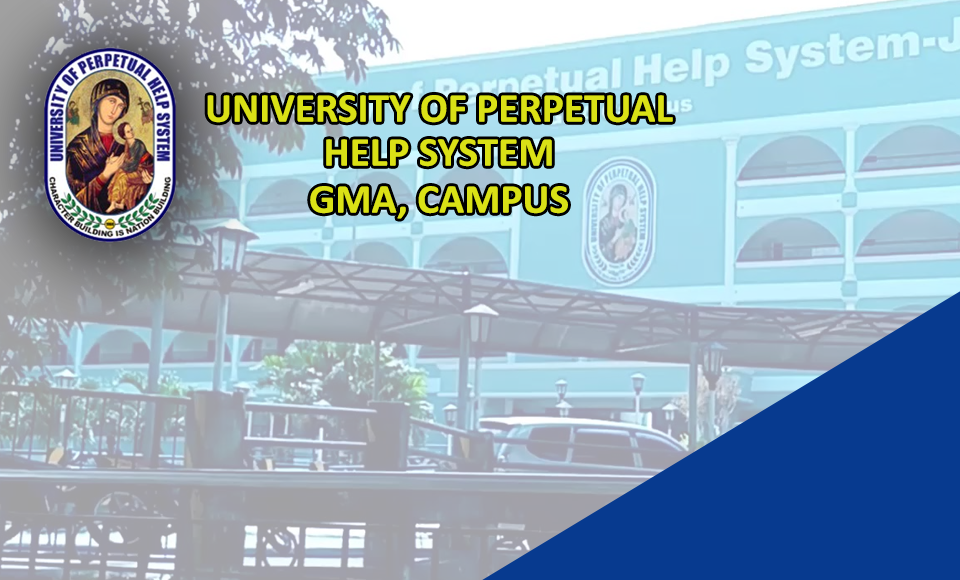
<style>
.page{position:relative;width:960px;height:580px}
.page>*{position:absolute;margin:0}
.t1{font:41.2px "Calibri-Bold";color:#dae116;text-transform:uppercase}
</style>
<div class="page">
<p class="t1" style="left:207px;top:95px;width:466px;height:28px">UNIVERSITY OF PERPETUAL</p>
<p class="t1" style="left:326px;top:139px;width:226px;height:28px">HELP SYSTEM</p>
<p class="t1" style="left:310px;top:186px;width:258px;height:33px">GMA, CAMPUS</p>
</div>
